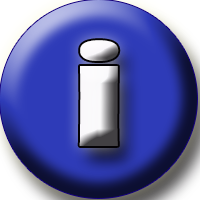
<style>
.page{position:relative;width:200px;height:200px}
.page>*{position:absolute;margin:0}
.t1{font:150px "Broadway"}
</style>
<div class="page">
<p class="t1" style="left:79px;top:40px;width:40px;height:106px">i</p>
</div>
